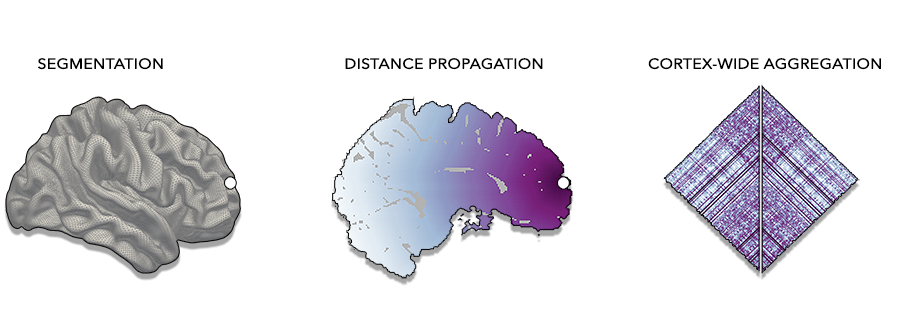
<style>
.page{position:relative;width:905px;height:329px;background:#ffffff}
.page>*{position:absolute;margin:0}
.t1{font:14.1px "AvenirNext-Regular";color:#000000;font-weight:bold;scale:1.11 1}
</style>
<div class="page">
<p class="t1" style="left:38px;top:58px;width:125px;height:12px">SEGMENTATION</p>
<p class="t1" style="left:345px;top:58px;width:198px;height:12px">DISTANCE PROPAGATION</p>
<p class="t1" style="left:648px;top:58px;width:233px;height:12px">CORTEX-WIDE AGGREGATION</p>
</div>
